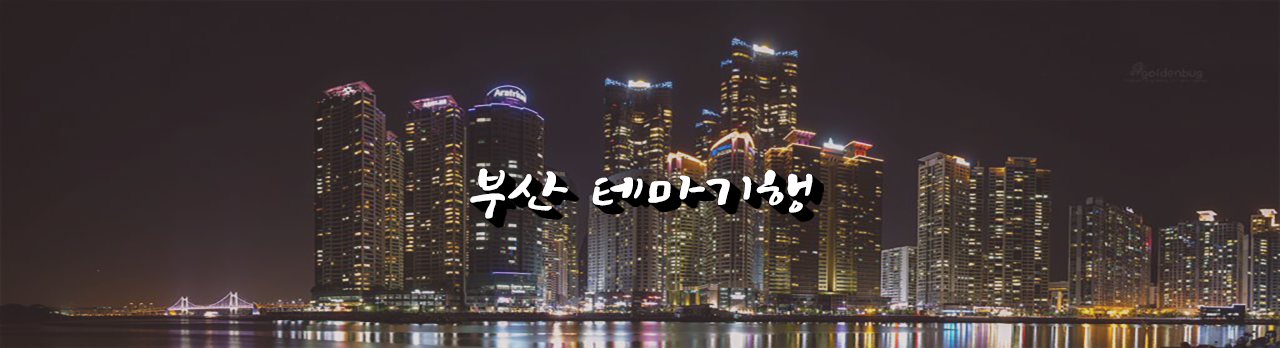
<style>
.page{position:relative;width:1280px;height:348px}
.page>*{position:absolute;margin:0}
.t1{font:60px "Makgeolli";letter-spacing:-0.01em;color:#ffffff;scale:1.25 1}
</style>
<div class="page">
<p class="t1" style="left:470px;top:168px;width:343px;height:51px">부산 테마기행</p>
</div>
